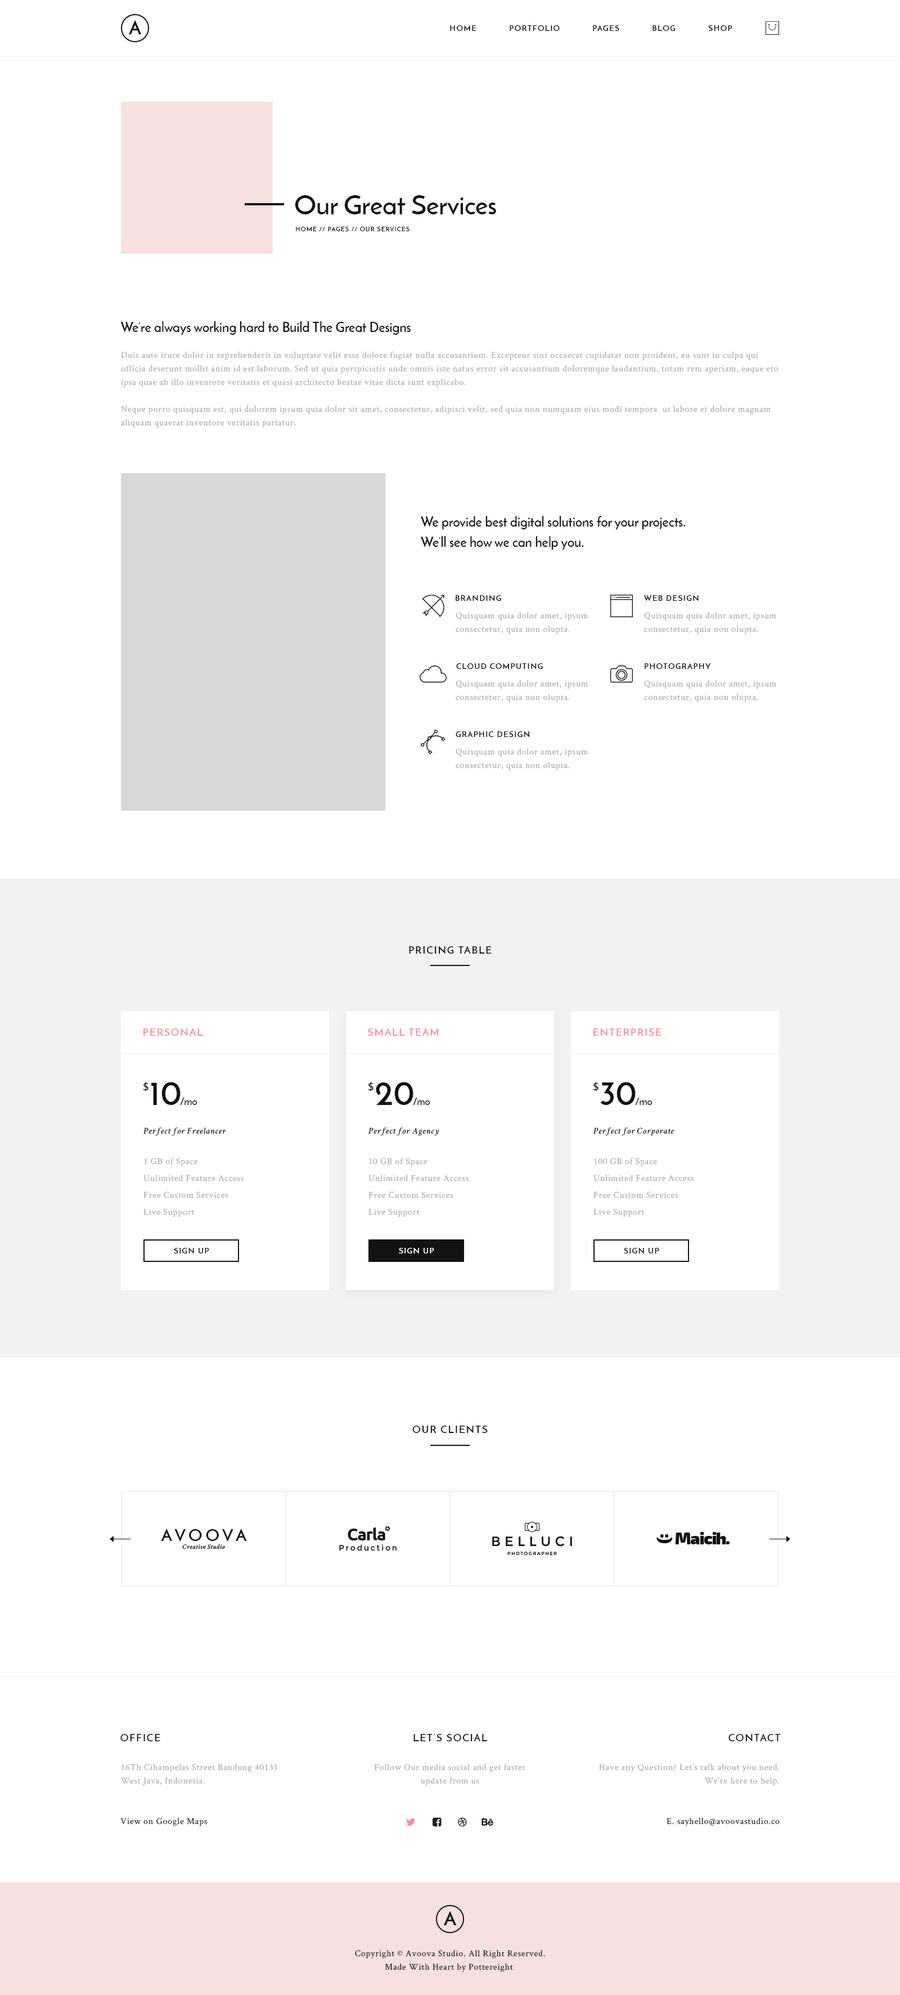
<style>
.page{position:relative;width:900px;height:1995px;background:#ffffff}
.page>*{position:absolute;margin:0}
.t1{font:19.1px "JosefinSans-Bold";letter-spacing:0.5em;color:#121212;text-transform:uppercase}
.t2{font:7.9px "JosefinSans-SemiBold";letter-spacing:0.1em;color:#121212;text-transform:uppercase}
.t3{font:27px "JosefinSans-SemiBold";color:#121212}
.t4{font:6.2px "JosefinSans-SemiBold";letter-spacing:0.1em;color:#121212;text-transform:uppercase}
.t5{font:13.5px "JosefinSans-SemiBold";color:#121212}
.t6{font:9px/13.5px "CrimsonText-Roman";letter-spacing:0.05em;color:#ababab}
.t7{font:13.5px/20.2px "JosefinSans-SemiBold";color:#121212}
.t8{font:10.1px "JosefinSans-SemiBold";letter-spacing:0.1em;color:#121212;text-transform:uppercase}
.t9{font:10.1px "JosefinSans-SemiBold";letter-spacing:0.1em;color:#f68c9d;text-transform:uppercase}
.t10{font:10.1px "JosefinSans-SemiBold";color:#121212}
.t11{font:33.8px "JosefinSans-Bold";color:#121212}
.t12{font:9px "CrimsonText-SemiboldItalic";letter-spacing:0.05em;color:#121212}
.t13{font:9px/16.9px "CrimsonText-Roman";letter-spacing:0.05em;color:#ababab}
.t14{font:7.9px "JosefinSans-SemiBold";letter-spacing:0.1em;color:#ffffff;text-transform:uppercase}
.t15{font:9px "CrimsonText-Roman";letter-spacing:0.05em;color:#121212}
.t16{font:9px/13.5px "CrimsonText-Roman";letter-spacing:0.05em;color:#121212}
</style>
<div class="page">
<p class="t1" style="left:129px;top:20px;width:13px;height:14px">a</p>
<p class="t2" style="left:450px;top:25px;width:26px;height:6px">Home</p>
<p class="t2" style="left:510px;top:25px;width:50px;height:6px">Portfolio</p>
<p class="t2" style="left:593px;top:25px;width:26px;height:6px">Pages</p>
<p class="t2" style="left:652px;top:25px;width:23px;height:6px">Blog</p>
<p class="t2" style="left:708px;top:25px;width:24px;height:6px">Shop</p>
<p class="t3" style="left:295px;top:195px;width:201px;height:20px">Our Great Services</p>
<p class="t4" style="left:296px;top:226px;width:114px;height:6px">Home // Pages // our Services</p>
<p class="t5" style="left:120px;top:321px;width:291px;height:14px">We’re always working hard to Build The Great Designs</p>
<p class="t6" style="left:121px;top:352px;width:657px;height:76px">Duis aute irure dolor in reprehenderit in voluptate velit esse dolore fugiat nulla accusantium. Excepteur sint occaecat cupidatat non proident, eu sunt in culpa qui officia deserunt mollit anim id est laborum. Sed ut quia perspiciatis unde omnis iste natus error sit accusantium doloremque laudantium, totam rem aperiam, eaque eto ipsa quae ab illo inventore veritatis et quasi architecto beatae vitae dicta sunt explicabo. <br><br>Neque porro quisquam est, qui dolorem ipsum quia dolor sit amet, consectetur, adipisci velit, sed quia non numquam eius modi tempora  ut labore et dolore magnam aliquam quaerat inventore veritatis pariatur.</p>
<p class="t7" style="left:421px;top:516px;width:265px;height:34px">We provide best digital solutions for your projects.<br>We’ll see how we can help you.</p>
<p class="t2" style="left:456px;top:595px;width:45px;height:6px">Branding</p>
<p class="t2" style="left:644px;top:595px;width:55px;height:6px">Web Design</p>
<p class="t6" style="left:456px;top:612px;width:132px;height:22px">Quisquam quia dolor amet, ipsum consectetur, quia non olupta.</p>
<p class="t6" style="left:644px;top:612px;width:132px;height:22px">Quisquam quia dolor amet, ipsum consectetur, quia non olupta.</p>
<p class="t2" style="left:456px;top:663px;width:87px;height:6px">Cloud Computing</p>
<p class="t2" style="left:645px;top:663px;width:66px;height:6px">Photography</p>
<p class="t6" style="left:456px;top:680px;width:132px;height:22px">Quisquam quia dolor amet, ipsum consectetur, quia non olupta.</p>
<p class="t6" style="left:644px;top:680px;width:132px;height:22px">Quisquam quia dolor amet, ipsum consectetur, quia non olupta.</p>
<p class="t2" style="left:456px;top:731px;width:73px;height:6px">Graphic Design</p>
<p class="t6" style="left:456px;top:748px;width:132px;height:22px">Quisquam quia dolor amet, ipsum consectetur, quia non olupta.</p>
<p class="t8" style="left:409px;top:946px;width:83px;height:8px">Pricing Table</p>
<p class="t9" style="left:143px;top:1028px;width:60px;height:8px">Personal</p>
<p class="t9" style="left:367px;top:1028px;width:71px;height:8px">Small Team</p>
<p class="t9" style="left:593px;top:1028px;width:69px;height:8px">Enterprise</p>
<p class="t10" style="left:143px;top:1082px;width:5px;height:9px">$</p>
<p class="t11" style="left:151px;top:1082px;width:30px;height:23px">10</p>
<p class="t10" style="left:368px;top:1082px;width:6px;height:9px">$</p>
<p class="t11" style="left:376px;top:1082px;width:37px;height:23px">20</p>
<p class="t10" style="left:593px;top:1082px;width:5px;height:9px">$</p>
<p class="t11" style="left:600px;top:1082px;width:36px;height:23px">30</p>
<p class="t10" style="left:180px;top:1097px;width:17px;height:8px">/mo</p>
<p class="t10" style="left:413px;top:1097px;width:17px;height:8px">/mo</p>
<p class="t10" style="left:635px;top:1097px;width:17px;height:8px">/mo</p>
<p class="t12" style="left:143px;top:1127px;width:83px;height:9px">Perfect for Freelancer</p>
<p class="t12" style="left:368px;top:1127px;width:71px;height:9px">Perfect for Agency</p>
<p class="t12" style="left:593px;top:1127px;width:81px;height:9px">Perfect for Corporate</p>
<p class="t13" style="left:143px;top:1158px;width:101px;height:59px">1 GB of Space<br>Unlimited Feature Access<br>Free Custom Services<br>Live Support</p>
<p class="t13" style="left:368px;top:1158px;width:101px;height:59px">10 GB of Space<br>Unlimited Feature Access<br>Free Custom Services<br>Live Support</p>
<p class="t13" style="left:593px;top:1158px;width:101px;height:59px">100 GB of Space<br>Unlimited Feature Access<br>Free Custom Services<br>Live Support</p>
<p class="t2" style="left:174px;top:1247px;width:35px;height:7px">Sign up</p>
<p class="t14" style="left:399px;top:1247px;width:35px;height:7px">Sign up</p>
<p class="t2" style="left:624px;top:1247px;width:35px;height:7px">Sign up</p>
<p class="t8" style="left:412px;top:1425px;width:76px;height:8px">Our Clients</p>
<p class="t8" style="left:120px;top:1734px;width:40px;height:7px">Office</p>
<p class="t8" style="left:413px;top:1733px;width:74px;height:8px">Let’s Social</p>
<p class="t8" style="left:728px;top:1733px;width:52px;height:9px">Contact</p>
<p class="t6" style="left:120px;top:1763px;width:157px;height:22px">16Th Cihampelas Street Bandung 40131<br>West Java, Indonesia.</p>
<p class="t6" style="left:374px;top:1763px;width:152px;height:22px;text-align:center">Follow Our media social and get faster<br>update from us</p>
<p class="t6" style="left:599px;top:1763px;width:181px;height:22px;text-align:right">Have any Question? Let’s talk about you need.<br>We’re here to help.</p>
<p class="t15" style="left:120px;top:1817px;width:88px;height:9px">View on Google Maps</p>
<p class="t15" style="left:667px;top:1817px;width:113px;height:9px">E. sayhello@avoovastudio.co</p>
<p class="t1" style="left:444px;top:1910px;width:13px;height:15px">a</p>
<p class="t16" style="left:355px;top:1950px;width:190px;height:22px;text-align:center">Copyright © Avoova Studio. All Right Reserved.<br>Made With Heart by Pottereight<span class="t6">.</span></p>
</div>
